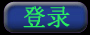
<style>
.page{position:relative;width:90px;height:35px}
.page>*{position:absolute;margin:0}
.t1{font:24px "System";color:#29eb60}
.t2{font:24px "System";color:#eb2929}
</style>
<div class="page">
<p class="t1" style="left:23px;top:6px;width:47px;height:22px"><span class="t2"> </span>登录</p>
</div>
